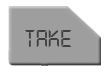
<style>
.page{position:relative;width:110px;height:72px;background:#9f9e9e}
.page>*{position:absolute;margin:0}
.t1{font:26px "DS-Digital";letter-spacing:-0.025em;color:#404040}
</style>
<div class="page">
<p class="t1" style="left:25px;top:29px;width:47px;height:19px">take</p>
</div>
